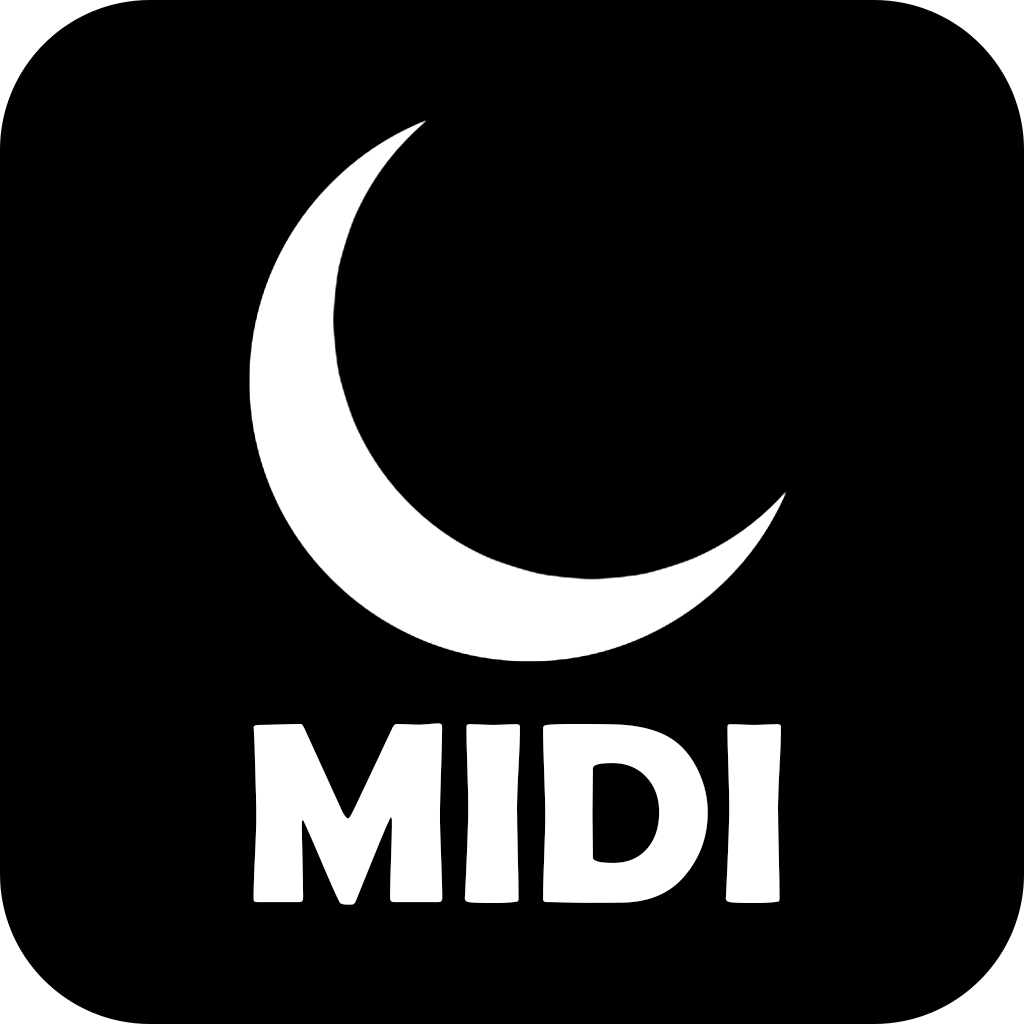
<style>
.page{position:relative;width:1024px;height:1024px;background:#000000}
.page>*{position:absolute;margin:0}
.t1{font:258.8px "BerlinSansFBDemi-Bold";color:#ffffff}
</style>
<div class="page">
<p class="t1" style="left:253px;top:723px;width:528px;height:182px">MIDI</p>
</div>
